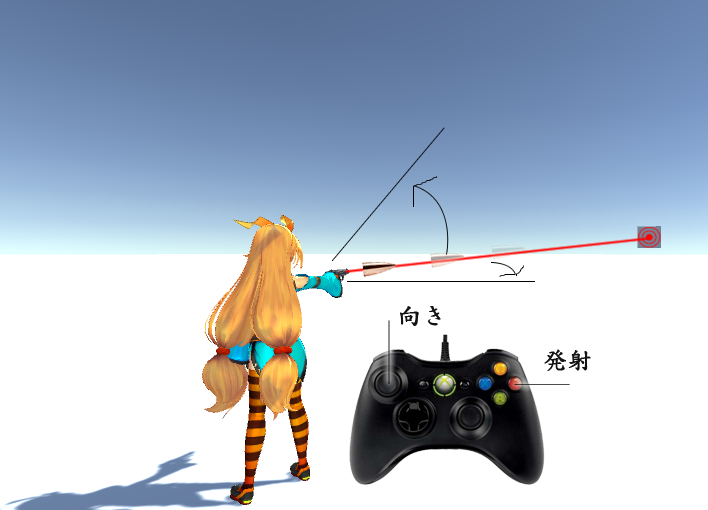
<style>
.page{position:relative;width:708px;height:510px;background:#ffffff}
.page>*{position:absolute;margin:0}
.t1{font:24px "DFKaiShu-SB-Estd-BF";color:#131313;font-weight:bold}
</style>
<div class="page">
<p class="t1" style="left:400px;top:306px;width:41px;height:20px">向き</p>
<p class="t1" style="left:544px;top:349px;width:47px;height:22px">発射</p>
</div>
